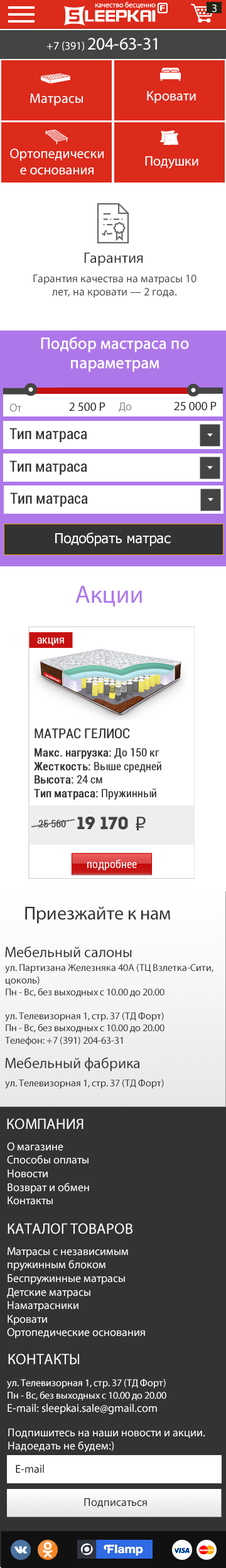
<style>
.page{position:relative;width:226px;height:1568px;background:#ffffff}
.page>*{position:absolute;margin:0}
.t1{font:11.3px "MyriadPro-Regular";color:#ffffff}
.t2{font:17.6px "MyriadPro-Regular";color:#ffffff}
.t3{font:13.8px "MyriadPro-Regular";color:#ffffff}
.t4{font:13.8px/16.6px "MyriadPro-Regular";color:#ffffff}
.t5{font:15.1px "MyriadPro-Regular";color:#333333}
.t6{font:11.3px/13.5px "MyriadPro-Regular";color:#444444}
.t7{font:16.3px/19.6px "MyriadPro-Regular";color:#ffffff;font-weight:bold}
.t8{font:12.5px "MyriadPro-Regular";color:#212121}
.t9{font:11.3px "MyriadPro-Regular";color:#888888}
.t10{font:13.8px "Tahoma";color:#ffffff}
.t11{font:25.1px "MyriadPro-Regular";color:#ad77e9}
.t12{font:18.8px "MyriadPro-Regular";color:#333333}
.t13{font:10px/12px "MyriadPro-Regular";color:#333333}
.t14{font:10px "MyriadPro-Regular";color:#333333}
.t15{font:15.1px "MyriadPro-Regular";color:#ffffff}
.t16{font:11.3px/13.5px "MyriadPro-Regular";color:#ffffff}
.t17{font:10px/12px "MyriadPro-Regular";color:#ffffff}
.t18{font:11.3px "MyriadPro-Regular";color:#111111}
.t19{font:11.3px "MyriadPro-Regular";color:#202020}
</style>
<div class="page">
<p class="t1" style="left:211px;top:4px;width:5px;height:9px">3</p>
<p class="t2" style="left:46px;top:38px;width:111px;height:13px"><span class="t1">+7 (391) </span>204-63-31</p>
<p class="t3" style="left:30px;top:93px;width:53px;height:13px">Матрасы</p>
<p class="t3" style="left:147px;top:91px;width:49px;height:12px">Кровати</p>
<p class="t4" style="left:10px;top:149px;width:93px;height:26px;text-align:center">Ортопедические основания</p>
<p class="t3" style="left:145px;top:156px;width:53px;height:13px">Подушки</p>
<p class="t5" style="left:84px;top:252px;width:59px;height:14px">Гарантия</p>
<p class="t6" style="left:33px;top:274px;width:163px;height:24px;text-align:center">Гарантия качества на матрасы 10 лет, на кровати — 2 года.</p>
<p class="t7" style="left:41px;top:337px;width:148px;height:35px;text-align:center">Подбор мастраса по параметрам</p>
<p class="t8" style="left:174px;top:401px;width:42px;height:10px">25 000 Р</p>
<p class="t9" style="left:9px;top:403px;width:13px;height:9px">От</p>
<p class="t8" style="left:69px;top:402px;width:36px;height:9px">2 500 Р</p>
<p class="t9" style="left:119px;top:402px;width:13px;height:10px">До</p>
<p class="t10" style="left:55px;top:532px;width:116px;height:14px">Подобрать матрас</p>
<p class="t11" style="left:75px;top:586px;width:67px;height:21px">Акции</p>
<p class="t12" style="left:25px;top:906px;width:145px;height:17px">Приезжайте к нам</p>
<p class="t5" style="left:5px;top:946px;width:127px;height:12px">Мебельный салоны</p>
<p class="t13" style="left:5px;top:963px;width:208px;height:83px">ул. Партизана Железняка 40А (ТЦ Взлетка-Сити, цоколь)<br>Пн - Вс, без выходных с 10.00 до 20.00<br><br>ул. Телевизорная 1, стр. 37 (ТД Форт)<br>Пн - Вс, без выходных с 10.00 до 20.00<br>Телефон: +7 (391) 204-63-31</p>
<p class="t5" style="left:5px;top:1057px;width:135px;height:14px">Мебельный фабрика</p>
<p class="t14" style="left:5px;top:1079px;width:159px;height:10px">ул. Телевизорная 1, стр. 37 (ТД Форт)</p>
<p class="t15" style="left:7px;top:1118px;width:76px;height:12px">КОМПАНИЯ</p>
<p class="t16" style="left:7px;top:1142px;width:82px;height:63px">О магазине<br>Способы оплаты<br>Новости<br>Возврат и обмен<br>Контакты</p>
<p class="t15" style="left:8px;top:1223px;width:124px;height:11px">КАТАЛОГ ТОВАРОВ</p>
<p class="t16" style="left:7px;top:1247px;width:138px;height:91px">Матрасы с независимым пружинным блоком<br>Беспружинные матрасы<br>Детские матрасы<br>Наматрасники<br>Кровати<br>Ортопедические основания</p>
<p class="t15" style="left:8px;top:1353px;width:71px;height:12px">КОНТАКТЫ</p>
<p class="t17" style="left:7px;top:1379px;width:159px;height:35px">ул. Телевизорная 1, стр. 37 (ТД Форт)<br>Пн - Вс, без выходных с 10.00 до 20.00<br><span class="t16">E-mail: sleepkai.sale@gmail.com</span></p>
<p class="t16" style="left:8px;top:1428px;width:197px;height:24px">Подпишитесь на наши новости и акции. Надоедать не будем:)</p>
<p class="t18" style="left:16px;top:1465px;width:28px;height:8px">E-mail</p>
<p class="t19" style="left:84px;top:1498px;width:63px;height:10px">Подписаться</p>
</div>
